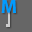
<style>
.page{position:relative;width:32px;height:32px;background:#666666}
.page>*{position:absolute;margin:0}
.t1{font:19px "MyriadPro-Bold";color:#009cff}
</style>
<div class="page">
<p class="t1" style="left:1px;top:0px;width:15px;height:13px">M</p>
</div>
